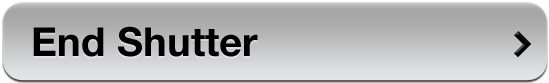
<style>
.page{position:relative;width:549px;height:83px}
.page>*{position:absolute;margin:0}
.t1{font:40px "HelveticaNeue-Bold";letter-spacing:0.005em;color:#000000}
</style>
<div class="page">
<p class="t1" style="left:33px;top:26px;width:225px;height:31px">End Shutter</p>
</div>
